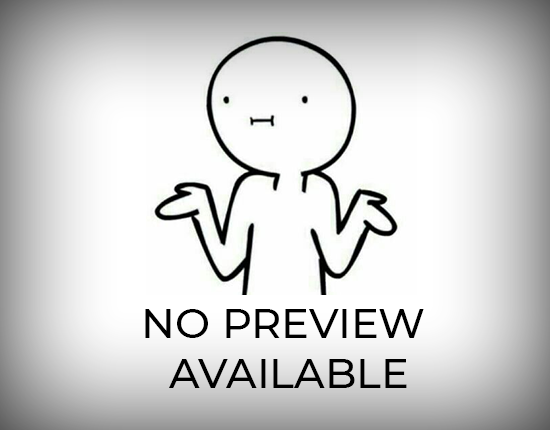
<style>
.page{position:relative;width:550px;height:430px}
.page>*{position:absolute;margin:0}
.t1{font:41.7px "Montserrat-Medium";color:#000000;text-transform:uppercase}
</style>
<div class="page">
<p class="t1" style="left:145px;top:309px;width:279px;height:79px;text-align:center">no preview <br>available</p>
</div>
